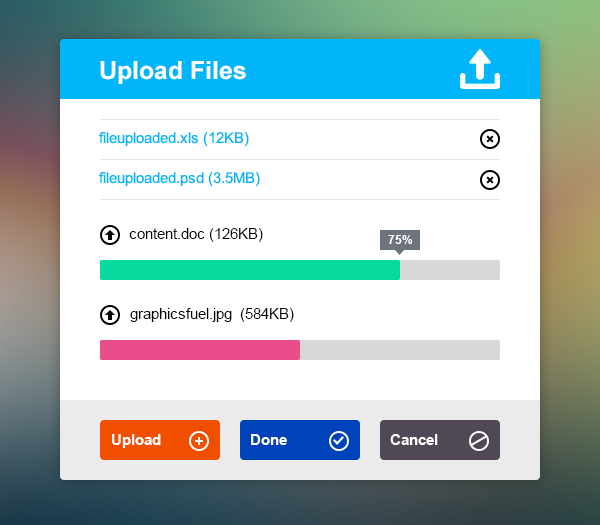
<style>
.page{position:relative;width:600px;height:525px;background:#ffffff}
.page>*{position:absolute;margin:0}
.t1{font:25px "Arial-BoldMT";color:#ffffff}
.t2{font:15px "ArialMT";color:#00b5f9}
.t3{font:15px "ArialMT";color:#000000}
.t4{font:12px "Arial-BoldMT";color:#ffffff}
.t5{font:15px "Arial-BoldMT";color:#ffffff}
</style>
<div class="page">
<p class="t1" style="left:100px;top:61px;width:146px;height:23px">Upload Files</p>
<p class="t2" style="left:99px;top:132px;width:150px;height:15px">fileuploaded.xls (12KB)</p>
<p class="t2" style="left:99px;top:172px;width:161px;height:15px">fileuploaded.psd (3.5MB)</p>
<p class="t3" style="left:129px;top:228px;width:134px;height:14px">content.doc (126KB)</p>
<p class="t4" style="left:388px;top:235px;width:25px;height:9px">75%</p>
<p class="t3" style="left:130px;top:308px;width:164px;height:14px">graphicsfuel.jpg  (584KB)</p>
<p class="t5" style="left:112px;top:434px;width:49px;height:14px">Upload</p>
<p class="t5" style="left:251px;top:434px;width:36px;height:11px">Done</p>
<p class="t5" style="left:390px;top:434px;width:48px;height:11px">Cancel</p>
</div>
